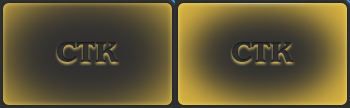
<style>
.page{position:relative;width:350px;height:108px}
.page>*{position:absolute;margin:0}
.t1{font:32px "UsherwoodStd-Black";color:#303030}
</style>
<div class="page">
<p class="t1" style="left:57px;top:41px;width:62px;height:21px">CTK</p>
<p class="t1" style="left:232px;top:41px;width:62px;height:21px">CTK</p>
</div>
